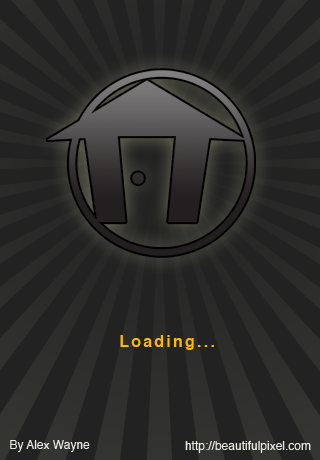
<style>
.page{position:relative;width:320px;height:460px;background:#222222}
.page>*{position:absolute;margin:0}
.t1{font:16px "Helvetica-Bold";letter-spacing:0.14em;color:#ffba00}
.t2{font:12px "Helvetica";color:#e9e9de}
</style>
<div class="page">
<p class="t1" style="left:120px;top:335px;width:94px;height:15px">Loading...</p>
<p class="t2" style="left:10px;top:440px;width:80px;height:12px">By Alex Wayne</p>
<p class="t2" style="left:185px;top:441px;width:126px;height:12px">http://beautifulpixel.com</p>
</div>
